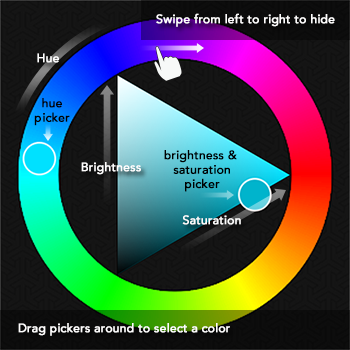
<style>
.page{position:relative;width:350px;height:350px}
.page>*{position:absolute;margin:0}
.t1{font:12px "Avenir-Medium";color:#fffefe;font-weight:bold}
.t2{font:12px "Avenir-Medium";color:#010101;font-weight:bold}
.t3{font:12px "Avenir-Medium";color:#000000;font-weight:bold}
</style>
<div class="page">
<p class="t1" style="left:156px;top:13px;width:179px;height:14px">Swipe from left to right to hide</p>
<p class="t1" style="left:37px;top:53px;width:22px;height:10px">Hue</p>
<p class="t2" style="left:34px;top:98px;width:36px;height:28px;text-align:center">hue<br>picker</p>
<p class="t3" style="left:164px;top:150px;width:73px;height:42px;text-align:center">brightness &amp; <br>saturation<br>picker</p>
<p class="t1" style="left:81px;top:162px;width:60px;height:13px">Brightness</p>
<p class="t1" style="left:182px;top:215px;width:59px;height:10px">Saturation</p>
<p class="t1" style="left:18px;top:323px;width:212px;height:13px">Drag pickers around to select a color</p>
</div>
